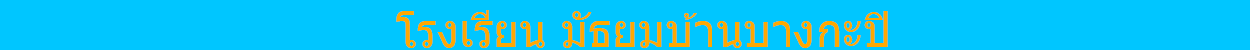
<style>
.page{position:relative;width:1250px;height:50px;background:#00c6ff}
.page>*{position:absolute;margin:0}
.t1{font:45.1px "Tahoma";color:#ffa800}
</style>
<div class="page">
<p class="t1" style="left:396px;top:10px;width:492px;height:38px">โรงเรียน มัธยมบ้านบางกะปิ</p>
</div>
